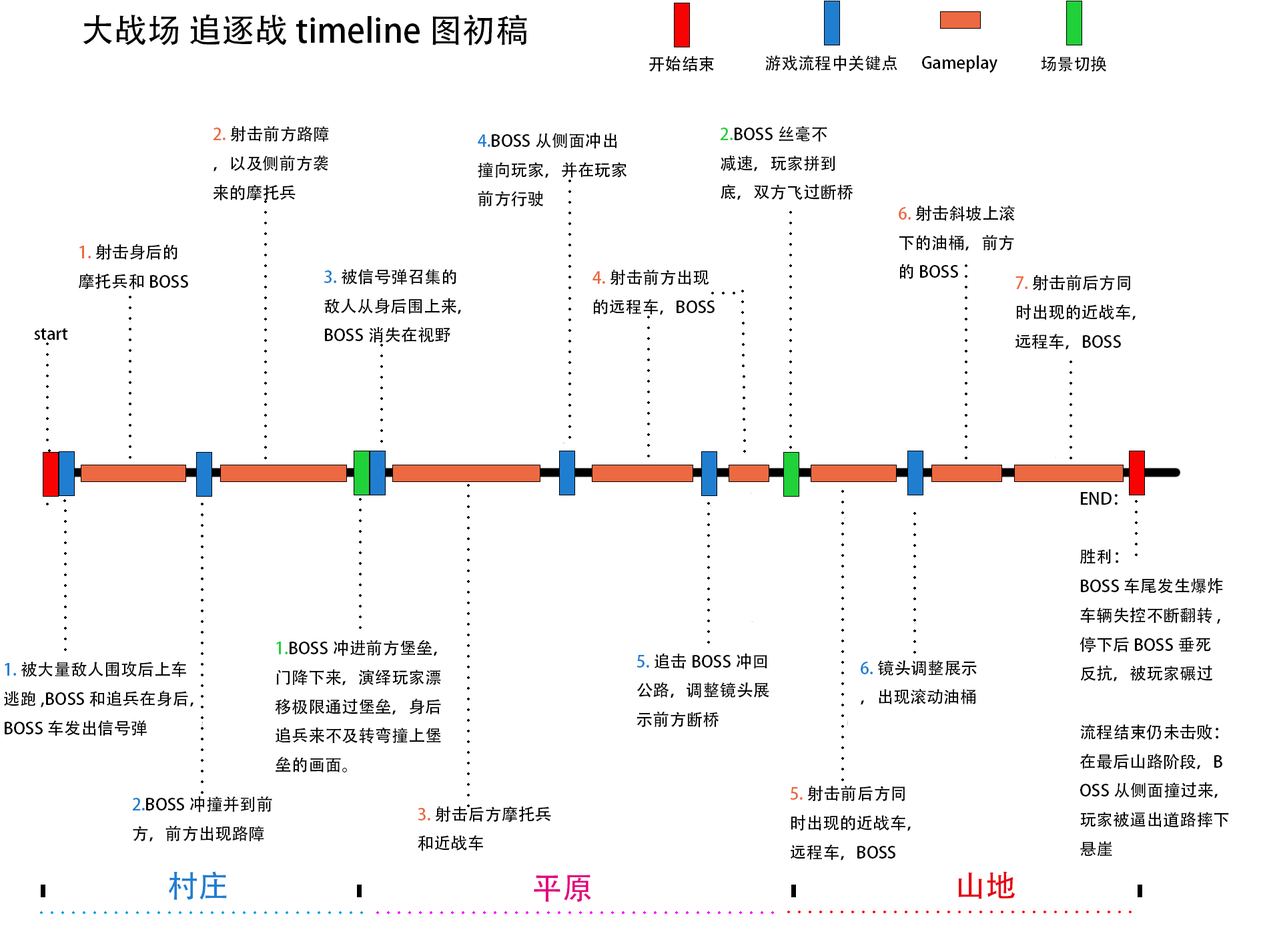
<style>
.page{position:relative;width:1261px;height:946px;background:#ffffff}
.page>*{position:absolute;margin:0}
.t1{font:33.4px "AdobeHeitiStd-Regular";color:#000000}
.t2{font:16.7px "AdobeHeitiStd-Regular";color:#000000}
.t3{font:16.7px "AdobeHeitiStd-Regular";color:#ec6941}
.t4{font:16.7px "AdobeHeitiStd-Regular";color:#207ed1}
.t5{font:16.7px "AdobeHeitiStd-Regular";color:#20d139}
.t6{font:30.6px "AdobeHeitiStd-Regular";color:#207ed1}
.t7{font:30.6px "AdobeHeitiStd-Regular";color:#e4007f}
.t8{font:30.6px "AdobeHeitiStd-Regular";color:#e60012}
</style>
<div class="page">
<p class="t1" style="left:83px;top:14px;width:444px;height:31px">大战场 追逐战 timeline图初稿</p>
<p class="t2" style="left:649px;top:55px;width:65px;height:16px">开始结束</p>
<p class="t2" style="left:765px;top:55px;width:132px;height:16px">游戏流程中关键点</p>
<p class="t2" style="left:922px;top:55px;width:76px;height:18px">Gameplay</p>
<p class="t2" style="left:1041px;top:55px;width:65px;height:17px">场景切换</p>
<p class="t2" style="left:213px;top:125px;width:116px;height:75px"><span class="t3">2.</span>射击前方路障<br>，以及侧前方袭<br>来的摩托兵</p>
<p class="t2" style="left:478px;top:132px;width:149px;height:75px"><span class="t4">4.</span>BOSS从侧面冲出<br>撞向玩家，并在玩家<br>前方行驶</p>
<p class="t2" style="left:721px;top:126px;width:132px;height:74px"><span class="t5">2.</span>BOSS丝毫不<br>减速，玩家拼到<br>底，双方飞过断桥</p>
<p class="t2" style="left:899px;top:206px;width:116px;height:73px"><span class="t3">6.</span>射击斜坡上滚<br>下的油桶，前方<br>的BOSS</p>
<p class="t2" style="left:78px;top:244px;width:110px;height:46px"><span class="t3">1.</span>射击身后的<br>摩托兵和BOSS</p>
<p class="t2" style="left:324px;top:269px;width:137px;height:73px"><span class="t4">3.</span>被信号弹召集的<br>敌人从身后围上来，<br>BOSS消失在视野</p>
<p class="t2" style="left:593px;top:269px;width:122px;height:46px"><span class="t3">4.</span>射击前方出现<br>的远程车，BOSS</p>
<p class="t2" style="left:1015px;top:274px;width:121px;height:76px"><span class="t3">7.</span>射击前后方同<br>时出现的近战车，<br>远程车，BOSS</p>
<p class="t2" style="left:34px;top:328px;width:34px;height:12px">start</p>
<p class="t2" style="left:1080px;top:492px;width:149px;height:363px">END：<br><br>胜利：<br>BOSS车尾发生爆炸<br>车辆失控不断翻转,<br>停下后BOSS垂死<br>反抗，被玩家碾过<br><br>流程结束仍未击败：<br>在最后山路阶段，B<br>OSS从侧面撞过来，<br>玩家被逼出道路摔下<br>悬崖</p>
<p class="t2" style="left:275px;top:639px;width:166px;height:133px"><span class="t5">1.</span>BOSS冲进前方堡垒，<br>门降下来，演绎玩家漂<br>移极限通过堡垒，身后<br>追兵来不及转弯撞上堡<br>垒的画面。</p>
<p class="t2" style="left:637px;top:653px;width:132px;height:74px"><span class="t4">5.</span>追击BOSS冲回<br>公路，调整镜头展<br>示前方断桥</p>
<p class="t2" style="left:4px;top:661px;width:190px;height:75px"><span class="t4">1.</span>被大量敌人围攻后上车<br>逃跑,BOSS和追兵在身后，<br>BOSS车发出信号弹</p>
<p class="t2" style="left:861px;top:660px;width:116px;height:45px"><span class="t4">6.</span>镜头调整展示<br>，出现滚动油桶</p>
<p class="t2" style="left:790px;top:785px;width:121px;height:75px"><span class="t3">5.</span>射击前后方同<br>时出现的近战车，<br>远程车，BOSS</p>
<p class="t2" style="left:133px;top:795px;width:139px;height:46px"><span class="t4">2.</span>BOSS冲撞并到前<br>方，前方出现路障</p>
<p class="t2" style="left:418px;top:806px;width:133px;height:45px"><span class="t3">3.</span>射击后方摩托兵<br>和近战车</p>
<p class="t6" style="left:168px;top:871px;width:59px;height:28px">村庄</p>
<p class="t7" style="left:534px;top:874px;width:57px;height:27px">平原</p>
<p class="t8" style="left:958px;top:871px;width:58px;height:28px">山地</p>
</div>
